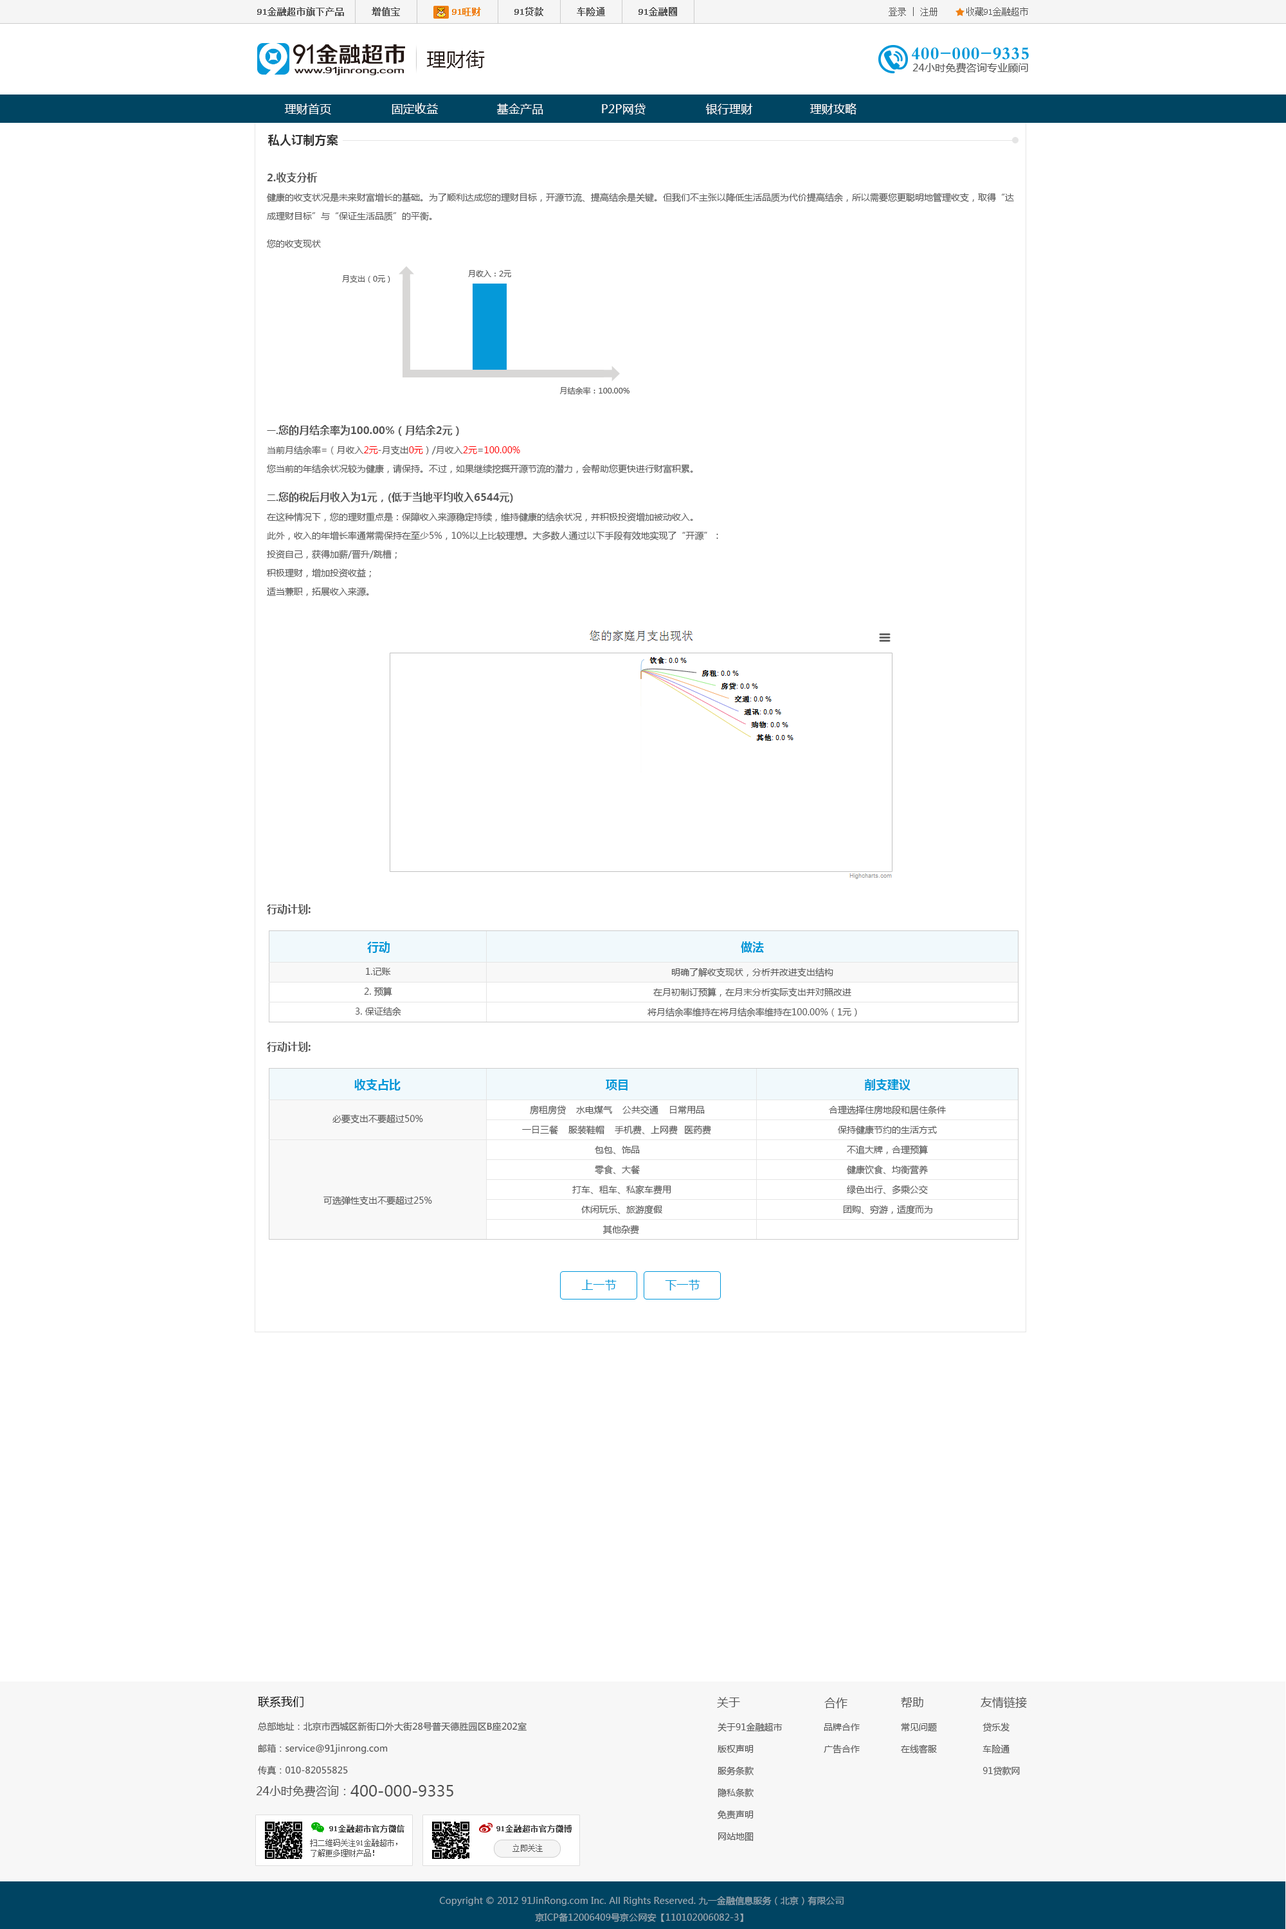
<style>
.page{position:relative;width:1286px;height:1929px;background:#ffffff}
.page>*{position:absolute;margin:0}
.t1{font:19.3px "MicrosoftYaHei";letter-spacing:0.01em;color:#231815}
.t2{font:11.6px "MicrosoftYaHei";letter-spacing:0.01em;color:#ffffff}
.t3{font:11.6px "MicrosoftYaHei-Bold";letter-spacing:0.01em;color:#333333}
.t4{font:10.3px "MicrosoftYaHei-Bold";color:#555555}
.t5{font:9px/15.4px "MicrosoftYaHei";color:#555555}
.t6{font:9px "MicrosoftYaHei";color:#555555}
.t7{font:7.7px "MicrosoftYaHei";color:#555555}
.t8{font:9px "MicrosoftYaHei-Bold";color:#555555}
.t9{font:9px/15.4px "MicrosoftYaHei";color:#ff0000}
.t10{font:11.6px "MicrosoftYaHei-Bold";color:#0098d8}
.t11{font:11.6px "MicrosoftYaHei";letter-spacing:0.01em;color:#0098d9}
</style>
<div class="page">
<p class="t1" style="left:426px;top:50px;width:59px;height:19px">理财街</p>
<p class="t2" style="left:285px;top:104px;width:46px;height:10px">理财首页</p>
<p class="t2" style="left:392px;top:103px;width:46px;height:11px">固定收益</p>
<p class="t2" style="left:497px;top:103px;width:46px;height:11px">基金产品</p>
<p class="t2" style="left:602px;top:104px;width:43px;height:10px">P2P网贷</p>
<p class="t2" style="left:705px;top:104px;width:48px;height:10px">银行理财</p>
<p class="t2" style="left:810px;top:103px;width:46px;height:11px">理财攻略</p>
<p class="t3" style="left:268px;top:134px;width:70px;height:12px">私人订制方案</p>
<p class="t4" style="left:267px;top:172px;width:51px;height:11px">2.收支分析</p>
<p class="t5" style="left:266px;top:193px;width:748px;height:28px">健康的收支状况是未来财富增长的基础。为了顺利达成您的理财目标，开源节流、提高结余是关键。但我们不主张以降低生活品质为代价提高结余，所以需要您更聪明地管理收支，取得“达<br>成理财目标”与“保证生活品质”的平衡。</p>
<p class="t6" style="left:267px;top:239px;width:54px;height:9px">您的收支现状</p>
<p class="t7" style="left:468px;top:270px;width:43px;height:7px">月收入：2元</p>
<p class="t7" style="left:342px;top:274px;width:48px;height:9px">月支出（0元）</p>
<p class="t7" style="left:559px;top:386px;width:70px;height:9px">月结余率：100.00%</p>
<p class="t4" style="left:267px;top:425px;width:192px;height:11px"><span class="t8">一.</span>您的月结余率为100.00%（月结余2元）</p>
<p class="t5" style="left:267px;top:446px;width:426px;height:28px">当前月结余率=（月收入<span class="t9">2元</span>-月支出<span class="t9">0元</span>）/月收入<span class="t9">2元</span>=<span class="t9">100.00%<br></span>您当前的年结余状况较为健康，请保持。不过，如果继续挖掘开源节流的潜力，会帮助您更快进行财富积累。</p>
<p class="t4" style="left:267px;top:492px;width:246px;height:11px"><span class="t8">二.</span>您的税后月收入为1元，(低于当地平均收入6544元)</p>
<p class="t5" style="left:267px;top:512px;width:451px;height:85px">在这种情况下，您的理财重点是：保障收入来源稳定持续，维持健康的结余状况，并积极投资增加被动收入。<br>此外，收入的年增长率通常需保持在至少5%，10%以上比较理想。大多数人通过以下手段有效地实现了“开源”：<br>投资自己，获得加薪/晋升/跳槽；<br>积极理财，增加投资收益；<br>适当兼职，拓展收入来源。</p>
<p class="t4" style="left:267px;top:904px;width:43px;height:10px">行动计划:</p>
<p class="t10" style="left:367px;top:941px;width:23px;height:12px">行动</p>
<p class="t10" style="left:741px;top:941px;width:23px;height:12px">做法</p>
<p class="t6" style="left:366px;top:968px;width:25px;height:7px">1.记账</p>
<p class="t6" style="left:671px;top:968px;width:162px;height:9px">明确了解收支现状，分析并改进支出结构</p>
<p class="t6" style="left:364px;top:987px;width:28px;height:9px">2. 预算</p>
<p class="t6" style="left:653px;top:987px;width:198px;height:10px">在月初制订预算，在月末分析实际支出并对照改进</p>
<p class="t6" style="left:355px;top:1007px;width:46px;height:9px">3. 保证结余</p>
<p class="t6" style="left:647px;top:1007px;width:210px;height:10px">将月结余率维持在将月结余率维持在100.00%（1元）</p>
<p class="t4" style="left:267px;top:1041px;width:43px;height:11px">行动计划:</p>
<p class="t10" style="left:354px;top:1079px;width:47px;height:11px">收支占比</p>
<p class="t10" style="left:606px;top:1079px;width:21px;height:11px">项目</p>
<p class="t10" style="left:864px;top:1079px;width:46px;height:11px">削支建议</p>
<p class="t6" style="left:530px;top:1105px;width:175px;height:10px">房租房贷 水电煤气 公共交通 日常用品</p>
<p class="t6" style="left:829px;top:1105px;width:117px;height:10px">合理选择住房地段和居住条件</p>
<p class="t6" style="left:332px;top:1114px;width:91px;height:9px">必要支出不要超过50%</p>
<p class="t6" style="left:522px;top:1125px;width:189px;height:10px">一日三餐 服装鞋帽 手机费、上网费 医药费</p>
<p class="t6" style="left:838px;top:1125px;width:99px;height:10px">保持健康节约的生活方式</p>
<p class="t6" style="left:595px;top:1146px;width:45px;height:8px">包包、饰品</p>
<p class="t6" style="left:847px;top:1145px;width:81px;height:10px">不追大牌，合理预算</p>
<p class="t6" style="left:595px;top:1165px;width:45px;height:9px">零食、大餐</p>
<p class="t6" style="left:846px;top:1165px;width:82px;height:9px">健康饮食、均衡营养</p>
<p class="t6" style="left:572px;top:1185px;width:99px;height:9px">打车、租车、私家车费用</p>
<p class="t6" style="left:847px;top:1185px;width:81px;height:9px">绿色出行、多乘公交</p>
<p class="t6" style="left:323px;top:1196px;width:109px;height:9px">可选弹性支出不要超过25%</p>
<p class="t6" style="left:581px;top:1205px;width:81px;height:9px">休闲玩乐、旅游度假</p>
<p class="t6" style="left:843px;top:1205px;width:89px;height:9px">团购、穷游，适度而为</p>
<p class="t6" style="left:602px;top:1225px;width:37px;height:9px">其他杂费</p>
<p class="t11" style="left:581px;top:1279px;width:35px;height:11px">上一节</p>
<p class="t11" style="left:665px;top:1279px;width:35px;height:11px">下一节</p>
</div>
